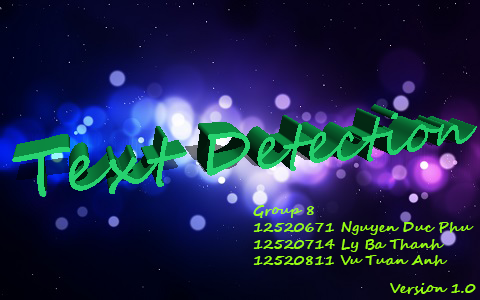
<style>
.page{position:relative;width:480px;height:300px}
.page>*{position:absolute;margin:0}
.t1{font:14px "SegoeScript-Bold";color:#98ff12}
</style>
<div class="page">
<p class="t1" style="left:253px;top:205px;width:221px;height:61px">Group 8<br>12520671 Nguyen Duc Phu<br>12520714 Ly Ba Thanh<br>12520811 Vu Tuan Anh</p>
<p class="t1" style="left:390px;top:283px;width:86px;height:12px">Version 1.0</p>
</div>
